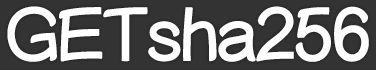
<style>
.page{position:relative;width:376px;height:70px;background:#333333}
.page>*{position:absolute;margin:0}
.t1{font:72px "YuppySC-Regular";letter-spacing:-0.04em;color:#ffffff;font-weight:bold}
</style>
<div class="page">
<p class="t1" style="left:7px;top:6px;width:362px;height:56px">GETsha256</p>
</div>
